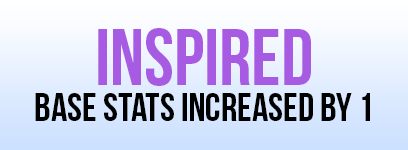
<style>
.page{position:relative;width:408px;height:150px}
.page>*{position:absolute;margin:0}
.t1{font:80px "BebasNeue";color:#a75ae2}
.t2{font:40px "BebasNeue";color:#000000}
</style>
<div class="page">
<p class="t1" style="left:98px;top:28px;width:213px;height:58px">inspired</p>
<p class="t2" style="left:35px;top:93px;width:335px;height:28px">base stats increased by 1</p>
</div>
